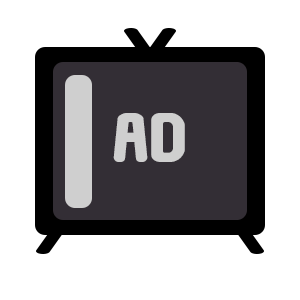
<style>
.page{position:relative;width:300px;height:300px;background:#ffffff}
.page>*{position:absolute;margin:0}
.t1{font:60px "Round_Pop";color:#cfcfcf}
</style>
<div class="page">
<p class="t1" style="left:113px;top:113px;width:72px;height:49px">ad</p>
</div>
